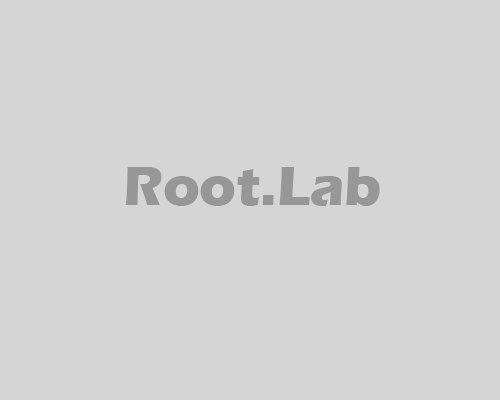
<style>
.page{position:relative;width:500px;height:400px;background:#d5d5d5}
.page>*{position:absolute;margin:0}
.t1{font:56.6px "ErasITC-Bold";color:#979797}
</style>
<div class="page">
<p class="t1" style="left:125px;top:167px;width:255px;height:39px">Root.Lab</p>
</div>
